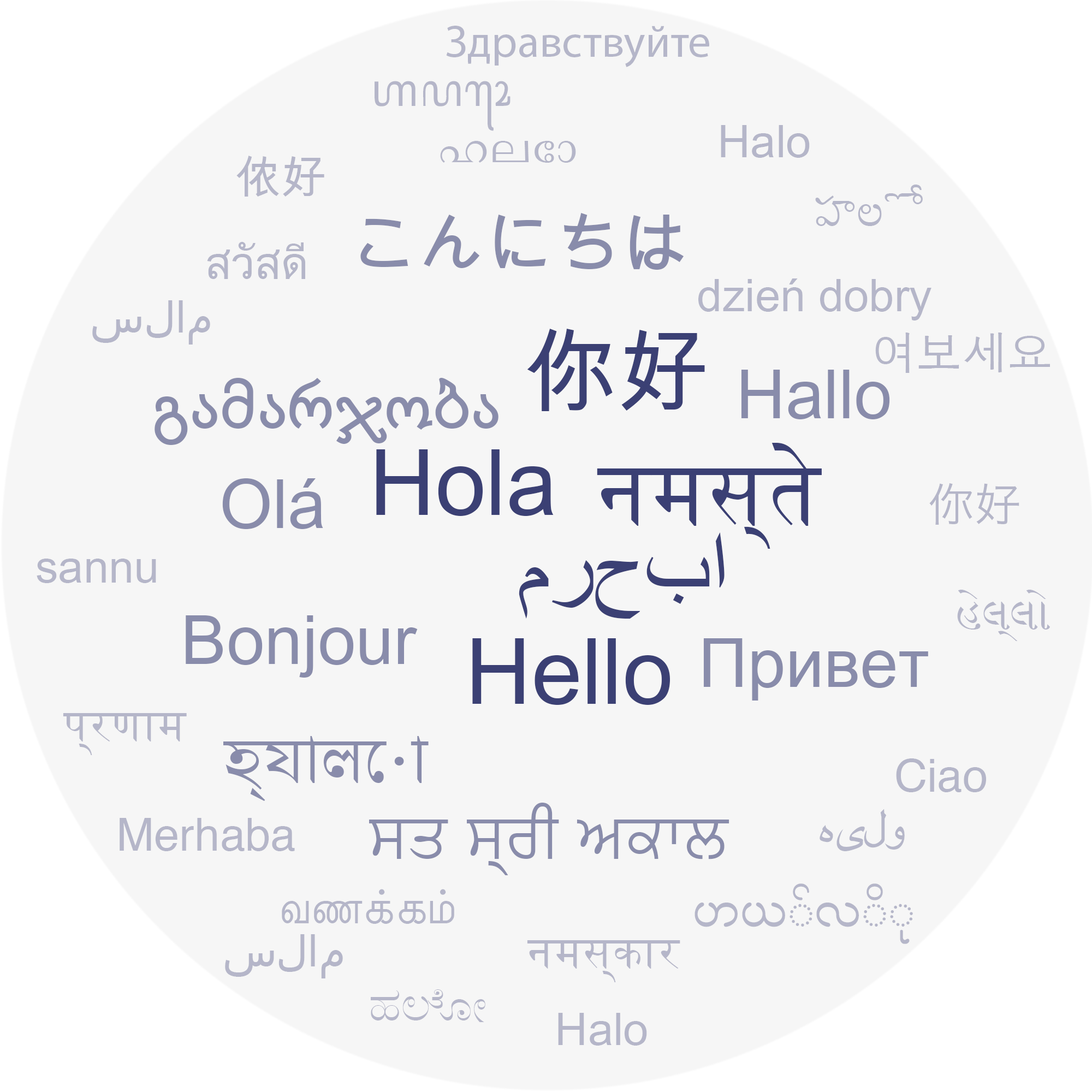
<style>
.page{position:relative;width:1092px;height:1092px;background:#f6f6f6}
.page>*{position:absolute;margin:0}
.t1{font:45.5px "MyriadPro-Regular";color:#b5b6c9}
.t2{font:45.5px "NotoSansJavanese";color:#b5b6c9}
.t3{font:45.5px "ArialUnicodeMS";color:#b5b6c9}
.t4{font:68.2px "ArialUnicodeMS";color:#898cab}
.t5{font:91px "ArialUnicodeMS";color:#3b4074}
.t6{font:45.5px "AppleGothic";color:#b5b6c9}
.t7{font:45.5px "HiraKakuProN-W3";color:#b5b6c9}
.t8{font:91px "ArialMT";color:#3b4074}
.t9{font:45.5px "DevanagariMT";color:#b5b6c9}
.t10{font:45.5px "Helvetica";color:#b5b6c9}
.t11{font:45.5px "GeezaPro";color:#b5b6c9}
.t12{font:45.5px "InaiMathi";color:#b5b6c9}
.t13{font:45.5px "MyanmarMN";color:#b5b6c9}
</style>
<div class="page">
<p class="t1" style="left:446px;top:26px;width:263px;height:41px">Здравствуйте</p>
<p class="t2" style="left:375px;top:81px;width:136px;height:50px">ꦲꦭꦺꦴ</p>
<p class="t3" style="left:721px;top:125px;width:89px;height:33px">Halo</p>
<p class="t3" style="left:440px;top:141px;width:136px;height:22px">ഹലോ</p>
<p class="t3" style="left:236px;top:156px;width:88px;height:41px">侬好</p>
<p class="t3" style="left:815px;top:185px;width:108px;height:41px">హలో</p>
<p class="t4" style="left:360px;top:213px;width:324px;height:57px">こんにちは</p>
<p class="t3" style="left:207px;top:242px;width:98px;height:37px">สวัสดี</p>
<p class="t3" style="left:698px;top:278px;width:233px;height:42px">dzień dobry</p>
<p class="t3" style="left:92px;top:300px;width:118px;height:45px">سلام</p>
<p class="t5" style="left:527px;top:329px;width:178px;height:82px">你好</p>
<p class="t6" style="left:875px;top:333px;width:175px;height:40px">여보세요</p>
<p class="t4" style="left:155px;top:378px;width:343px;height:67px">გამარჯობა</p>
<p class="t4" style="left:741px;top:370px;width:149px;height:49px">Hallo</p>
<p class="t5" style="left:376px;top:449px;width:178px;height:67px">Hola</p>
<p class="t5" style="left:597px;top:443px;width:225px;height:106px">नमस्ते</p>
<p class="t4" style="left:222px;top:478px;width:101px;height:51px">Olá</p>
<p class="t7" style="left:929px;top:483px;width:90px;height:42px">你好</p>
<p class="t8" style="left:519px;top:532px;width:206px;height:87px">مرحبا</p>
<p class="t3" style="left:37px;top:559px;width:119px;height:24px">sannu</p>
<p class="t3" style="left:957px;top:590px;width:93px;height:51px">હેલ્લો</p>
<p class="t4" style="left:186px;top:615px;width:232px;height:63px">Bonjour</p>
<p class="t5" style="left:472px;top:638px;width:198px;height:67px">Hello</p>
<p class="t4" style="left:703px;top:638px;width:225px;height:63px">Привет</p>
<p class="t9" style="left:63px;top:713px;width:124px;height:42px">प्रणाम</p>
<p class="t4" style="left:223px;top:736px;width:206px;height:65px">হ্যালো</p>
<p class="t10" style="left:896px;top:758px;width:90px;height:34px">Ciao</p>
<p class="t4" style="left:369px;top:803px;width:360px;height:72px">ਸਤ ਸ੍ਰੀ ਅਕਾਲ</p>
<p class="t11" style="left:820px;top:809px;width:85px;height:42px">ہیلو</p>
<p class="t10" style="left:120px;top:818px;width:175px;height:33px">Merhaba</p>
<p class="t12" style="left:282px;top:889px;width:172px;height:35px">வணக்கம்</p>
<p class="t13" style="left:695px;top:883px;width:218px;height:61px">ဟယ်လို</p>
<p class="t3" style="left:225px;top:934px;width:118px;height:44px">سلام</p>
<p class="t9" style="left:527px;top:940px;width:153px;height:42px">नमस्कार</p>
<p class="t3" style="left:371px;top:989px;width:114px;height:33px">ಹಲೋ</p>
<p class="t3" style="left:558px;top:1013px;width:89px;height:33px">Halo</p>
</div>
